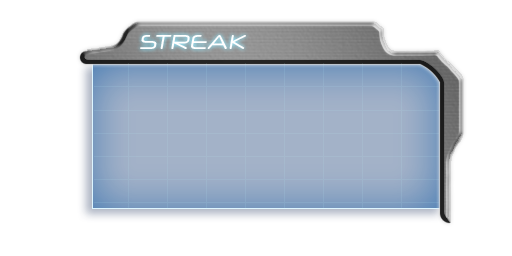
<style>
.page{position:relative;width:512px;height:256px;background:#ffffff}
.page>*{position:absolute;margin:0}
.t1{font:20px "NeuropolXFree";color:#ffffff;font-style:italic}
</style>
<div class="page">
<p class="t1" style="left:140px;top:35px;width:106px;height:14px">STREAK</p>
</div>
